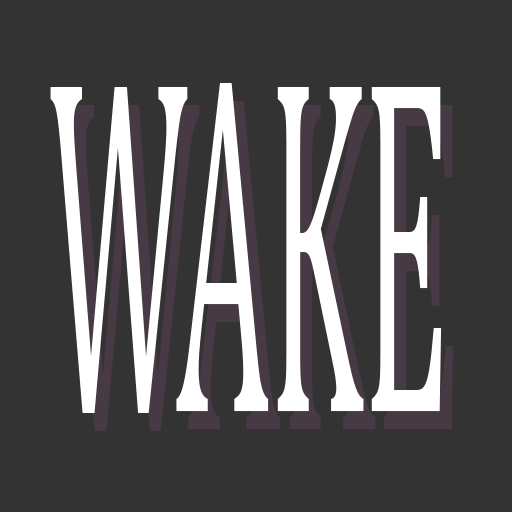
<style>
.page{position:relative;width:512px;height:512px;background:#333333}
.page>*{position:absolute;margin:0}
.t1{font:486px "Cambria";color:#ffffff;scale:0.31 1}
</style>
<div class="page">
<p class="t1" style="left:50px;top:83px;width:392px;height:330px">WAKE</p>
</div>
